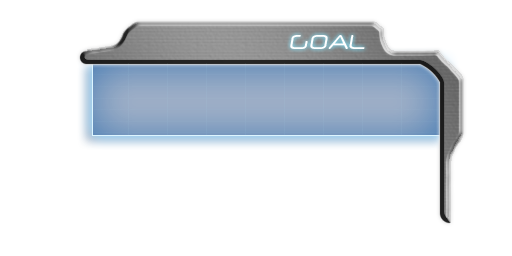
<style>
.page{position:relative;width:512px;height:256px;background:#ffffff}
.page>*{position:absolute;margin:0}
.t1{font:20px "NeuropolXFree";color:#ffffff;font-style:italic}
</style>
<div class="page">
<p class="t1" style="left:290px;top:35px;width:75px;height:14px">GOAL</p>
</div>
